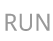
<style>
.page{position:relative;width:53px;height:41px;background:#ffffff}
.page>*{position:absolute;margin:0}
.t1{font:23.7px "DroidSans";color:#999999}
</style>
<div class="page">
<p class="t1" style="left:5px;top:13px;width:45px;height:18px">RUN</p>
</div>
